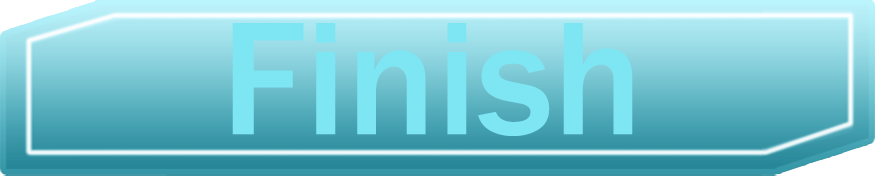
<style>
.page{position:relative;width:875px;height:176px}
.page>*{position:absolute;margin:0}
.t1{font:166.7px "FranklinGothic-Medium";color:#7ee5f2}
</style>
<div class="page">
<p class="t1" style="left:232px;top:23px;width:401px;height:113px">Finish</p>
</div>
